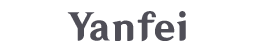
<style>
.page{position:relative;width:256px;height:56px;background:#ffffff}
.page>*{position:absolute;margin:0}
.t1{font:36px "HYWenHei-HEW";color:#4f4e57}
</style>
<div class="page">
<p class="t1" style="left:67px;top:11px;width:119px;height:31px">Yanfei</p>
</div>
